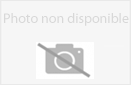
<style>
.page{position:relative;width:131px;height:85px;background:#f6f6f6}
.page>*{position:absolute;margin:0}
.t1{font:14px "MyriadPro-Regular";color:#d8d8d8}
</style>
<div class="page">
<p class="t1" style="left:4px;top:13px;width:125px;height:13px">Photo non disponible</p>
</div>
